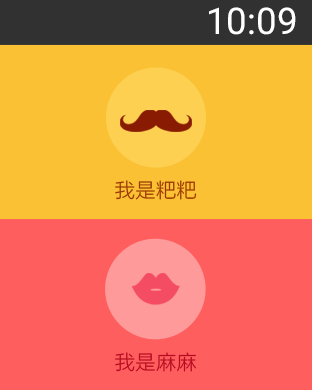
<style>
.page{position:relative;width:312px;height:390px;background:#f9c133}
.page>*{position:absolute;margin:0}
.t1{font:36.7px "Roboto-Regular";color:#ffffff}
.t2{font:20px "STHeitiSC-Light";color:#993300}
.t3{font:20px "STHeitiSC-Light";color:#b50a21}
</style>
<div class="page">
<p class="t1" style="left:209px;top:7px;width:87px;height:28px">10:09</p>
<p class="t2" style="left:115px;top:180px;width:82px;height:20px">我是粑粑</p>
<p class="t3" style="left:115px;top:352px;width:81px;height:20px">我是麻麻</p>
</div>
